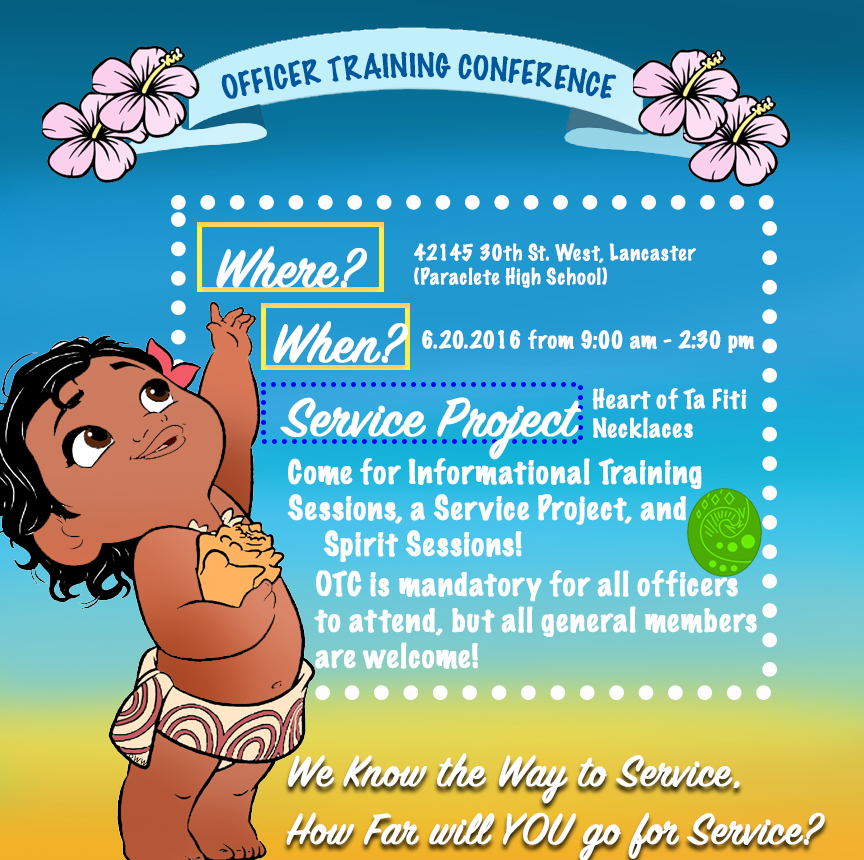
<style>
.page{position:relative;width:864px;height:860px}
.page>*{position:absolute;margin:0}
.t1{font:30px "MarkerFelt-Thin";color:#00589c}
.t2{font:60px "SignPainter-HouseScript";color:#ffffff;font-weight:bold}
.t3{font:20px "MarkerFelt-Thin";color:#fdfdfd;font-weight:bold}
.t4{font:22px "MarkerFelt-Thin";color:#fdfdfd;font-weight:bold}
.t5{font:24px "MarkerFelt-Thin";color:#fdfdfd;font-weight:bold}
.t6{font:30px "MarkerFelt-Thin";color:#fdfdfd;font-weight:bold}
.t7{font:48px "SignPainter-HouseScript";color:#ffffff;font-weight:bold}
</style>
<div class="page">
<p class="t1" style="left:221px;top:51px;width:396px;height:48px">OFFICER TRAINING CONFERENCE</p>
<p class="t2" style="left:216px;top:246px;width:151px;height:42px">Where?</p>
<p class="t3" style="left:414px;top:243px;width:282px;height:45px">42145 30th St. West, Lancaster <br>(Paraclete High School)</p>
<p class="t2" style="left:273px;top:321px;width:135px;height:42px">When?</p>
<p class="t4" style="left:422px;top:329px;width:333px;height:24px">6.20.2016 from 9:00 am - 2:30 pm</p>
<p class="t5" style="left:592px;top:388px;width:155px;height:51px">Heart of Ta Fiti <br>Necklaces</p>
<p class="t2" style="left:280px;top:397px;width:302px;height:63px">Service Project</p>
<p class="t6" style="left:287px;top:458px;width:415px;height:104px">Come for Informational Training <br>Sessions, a Service Project, and <br> Spirit Sessions!</p>
<p class="t6" style="left:314px;top:570px;width:443px;height:99px">OTC is mandatory for all officers<br>to attend, but all general members<br>are welcome!</p>
<p class="t7" style="left:286px;top:753px;width:539px;height:109px">We Know the Way to Service,<br>How Far will YOU go for Service?</p>
</div>
